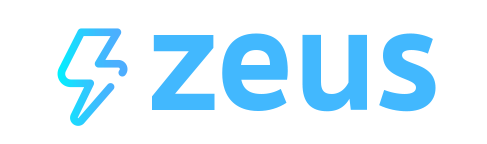
<style>
.page{position:relative;width:487px;height:144px;background:#ffffff}
.page>*{position:absolute;margin:0}
.t1{font:144px "Tosia-DemiBold";color:#42b8fe}
</style>
<div class="page">
<p class="t1" style="left:152px;top:33px;width:284px;height:79px">zeus</p>
</div>
